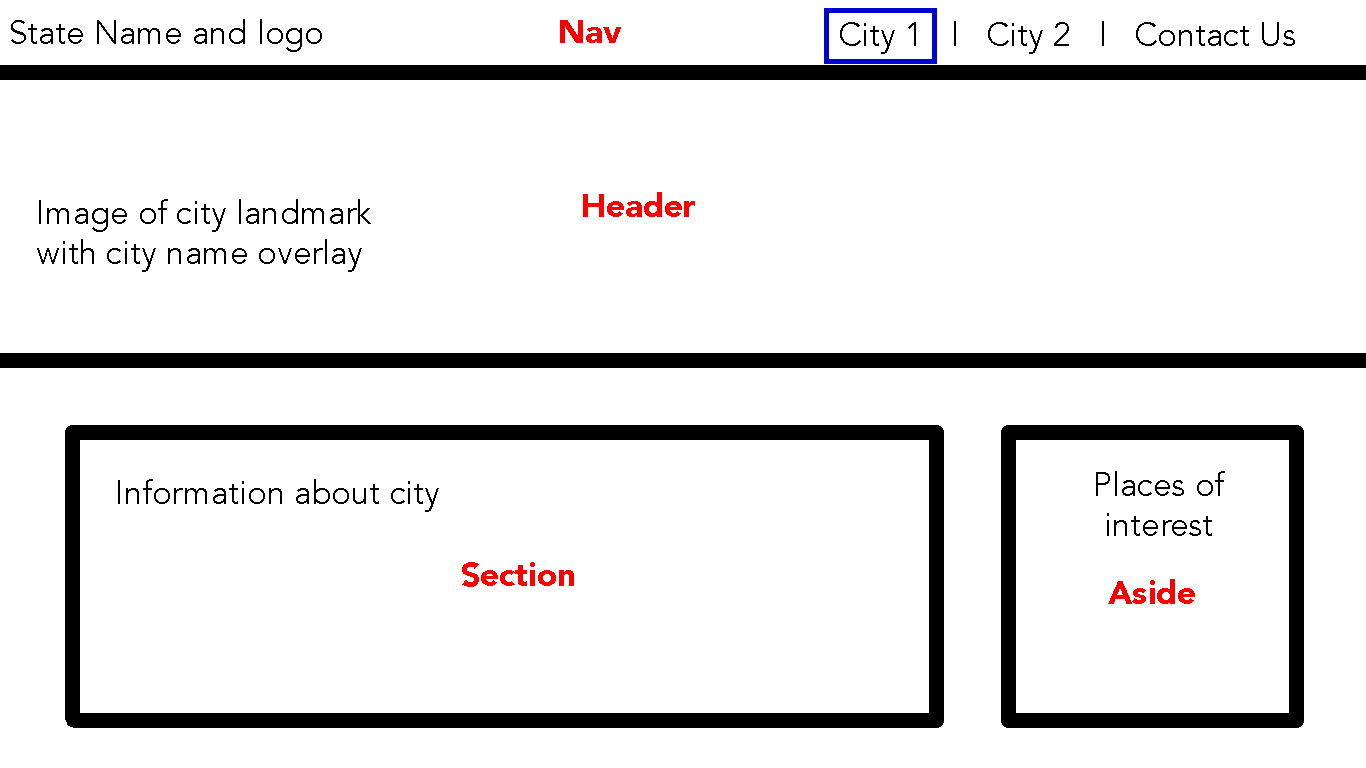
<style>
.page{position:relative;width:1366px;height:768px;background:#ffffff}
.page>*{position:absolute;margin:0}
.t1{font:33px "Avenir-Book";color:#000000}
.t2{font:33px "Avenir-Black";color:#ff0000}
</style>
<div class="page">
<p class="t1" style="left:11px;top:19px;width:311px;height:33px">State Name and logo</p>
<p class="t2" style="left:560px;top:20px;width:61px;height:23px">Nav</p>
<p class="t1" style="left:840px;top:21px;width:455px;height:33px">City 1   |   City 2   |   Contact Us</p>
<p class="t2" style="left:583px;top:192px;width:112px;height:25px">Header</p>
<p class="t1" style="left:37px;top:199px;width:334px;height:73px">Image of city landmark<br>with city name overlay</p>
<p class="t1" style="left:1096px;top:471px;width:129px;height:65px;text-align:center">Places of<br>interest</p>
<p class="t1" style="left:118px;top:479px;width:321px;height:33px">Information about city</p>
<p class="t2" style="left:462px;top:562px;width:112px;height:25px">Section</p>
<p class="t2" style="left:1108px;top:579px;width:87px;height:25px">Aside</p>
</div>
